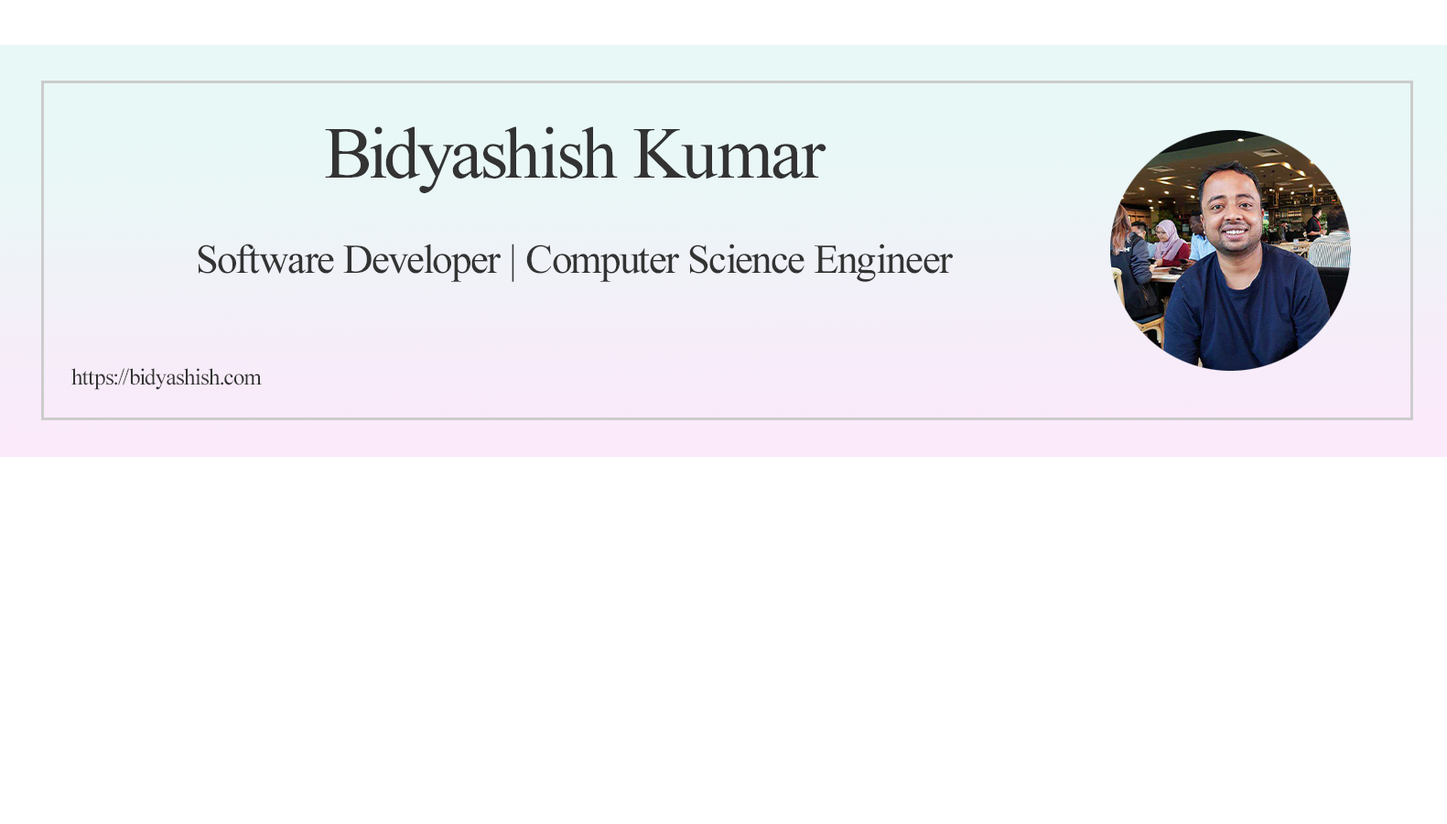
<style>
.page{position:relative;width:1447px;height:824px;background:#ffffff}
.page>*{position:absolute;margin:0}
.t1{font:41.2px/15.9px "TimesNewRomanPSMT";letter-spacing:-0.025em;color:#333333}
.t2{font:73.2px/15.9px "TimesNewRomanPSMT";letter-spacing:-0.025em;color:#333333}
.t3{font:22.9px/15.9px "TimesNewRomanPSMT";letter-spacing:-0.025em;color:#333333}
</style>
<div class="page">
<p class="t1" style="left:71px;top:126px;width:882px;height:264px;text-align:center"><span class="t2">Bidyashish Kumar<br><br><br><br><br><br></span>Software Developer | Computer Science Engineer<br><br><br><br><br><span class="t3"><br><br>https://bidyashish.com</span></p>
</div>
